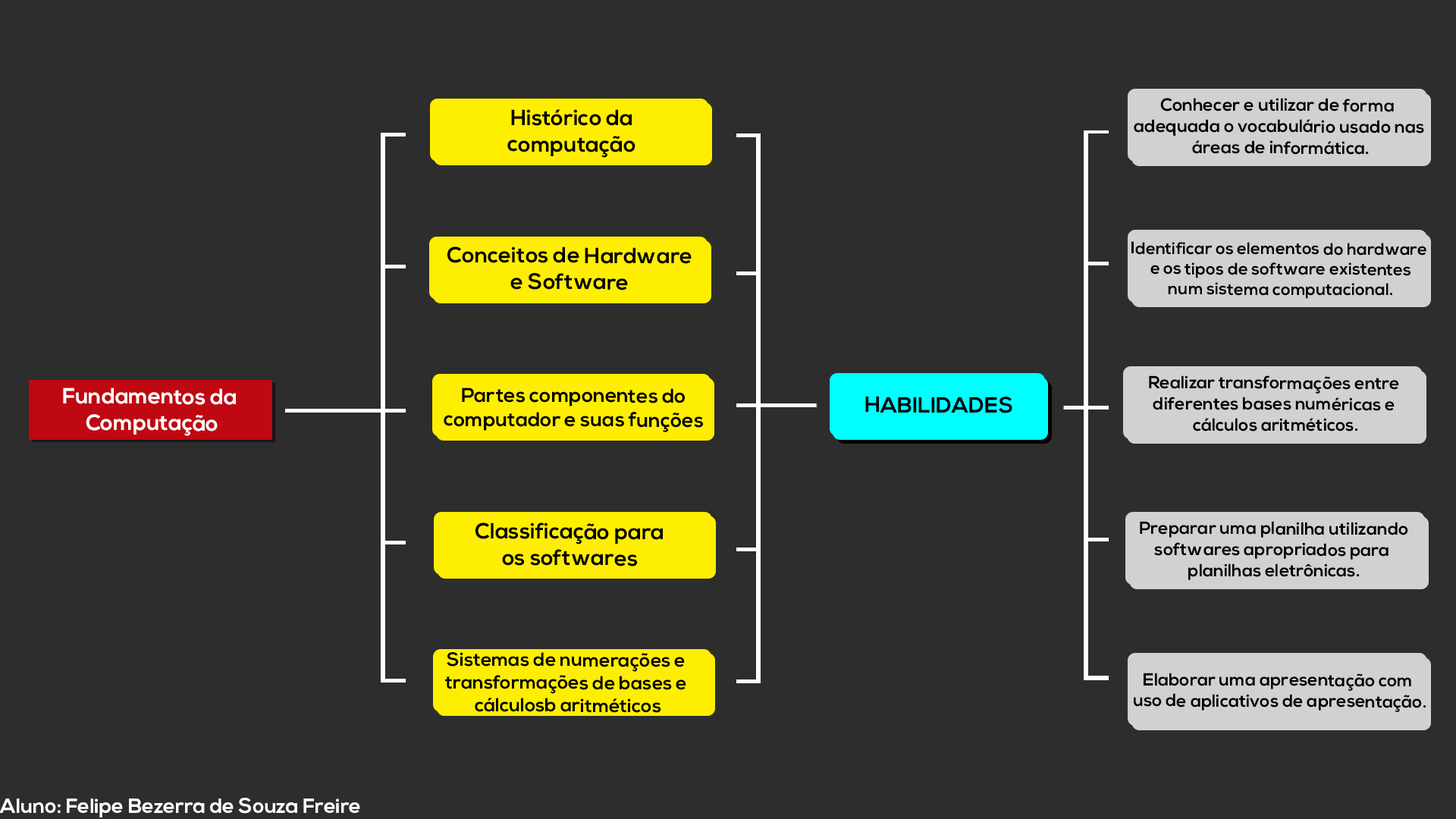
<style>
.page{position:relative;width:1456px;height:819px;background:#2d2d2d}
.page>*{position:absolute;margin:0}
.t1{font:17.8px "NexaBold";color:#000000}
.t2{font:22px "NexaBold";color:#000000}
.t3{font:16.9px "NexaBold";color:#000000}
.t4{font:17.6px "NexaBold";color:#000000}
.t5{font:22px "NexaBold";color:#ffffff}
.t6{font:20.2px "NexaBold";color:#000000}
.t7{font:19px "NexaBold";color:#000000}
.t8{font:20.5px "NexaBold";color:#ffffff}
</style>
<div class="page">
<p class="t1" style="left:1134px;top:98px;width:290px;height:57px;text-align:center">Conhecer e utilizar de forma <br>adequada o vocabulário usado nas<br> áreas de informática.</p>
<p class="t2" style="left:507px;top:109px;width:128px;height:49px;text-align:center">Histórico da<br>computação</p>
<p class="t3" style="left:1131px;top:241px;width:295px;height:58px;text-align:center">Identificar os elementos do hardware<br> e os tipos de software existentes<br> num sistema computacional.</p>
<p class="t2" style="left:447px;top:246px;width:245px;height:44px;text-align:center">Conceitos de Hardware<br>e Software</p>
<p class="t4" style="left:1149px;top:375px;width:250px;height:56px;text-align:center">Realizar transformações entre <br>diferentes bases numéricas e <br>cálculos aritméticos.</p>
<p class="t5" style="left:63px;top:388px;width:173px;height:48px;text-align:center">Fundamentos da <br>Computação</p>
<p class="t6" style="left:444px;top:388px;width:259px;height:44px;text-align:center">Partes componentes do<br>computador e suas funções</p>
<p class="t2" style="left:865px;top:396px;width:147px;height:17px">HABILIDADES</p>
<p class="t4" style="left:1140px;top:521px;width:268px;height:59px;text-align:center">Preparar uma planilha utilizando<br>softwares apropriados para <br>planilhas eletrônicas.</p>
<p class="t2" style="left:475px;top:522px;width:188px;height:44px;text-align:center">Classificação para<br>os softwares</p>
<p class="t7" style="left:445px;top:652px;width:241px;height:61px;text-align:center">Sistemas de numerações e <br>transformações de bases e <br>cálculosb aritméticos</p>
<p class="t4" style="left:1134px;top:673px;width:292px;height:39px;text-align:center">Elaborar uma apresentação com<br> uso de aplicativos de apresentação.</p>
<p class="t8" style="left:0px;top:798px;width:360px;height:19px">Aluno: Felipe Bezerra de Souza Freire</p>
</div>
